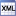
<style>
.page{position:relative;width:16px;height:16px}
.page>*{position:absolute;margin:0}
.t1{font:6.7px "ArialMT";color:#000000}
</style>
<div class="page">
<p class="t1" style="left:1px;top:5px;width:15px;height:6px">XML</p>
</div>
